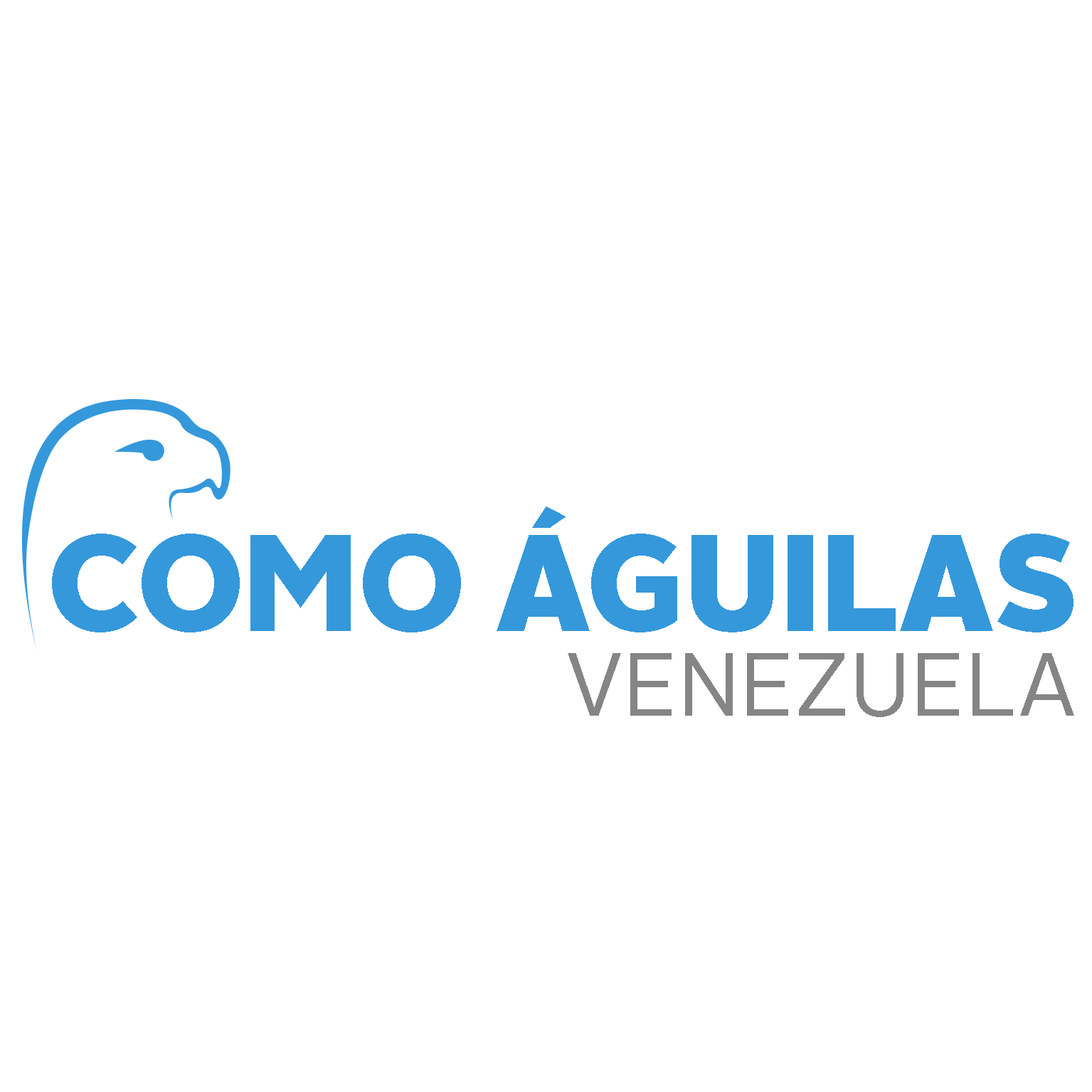
<style>
.page{position:relative;width:1092px;height:1092px;background:#ffffff}
.page>*{position:absolute;margin:0}
.t1{font:136.9px "AlrightSans-Black";color:#3498db;scale:0.97 1}
.t2{font:88.9px "AlrightSans-Regular";color:#858585;scale:0.96 1}
</style>
<div class="page">
<p class="t1" style="left:52px;top:507px;width:1021px;height:125px">COMO ÁGUILAS</p>
<p class="t2" style="left:568px;top:653px;width:506px;height:64px">VENEZUELA</p>
</div>
